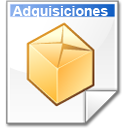
<style>
.page{position:relative;width:128px;height:128px;background:#ffffff}
.page>*{position:absolute;margin:0}
.t1{font:14px "Arial-BoldMT";color:#ffffff}
</style>
<div class="page">
<p class="t1" style="left:12px;top:6px;width:96px;height:13px">Adquisiciones</p>
</div>
